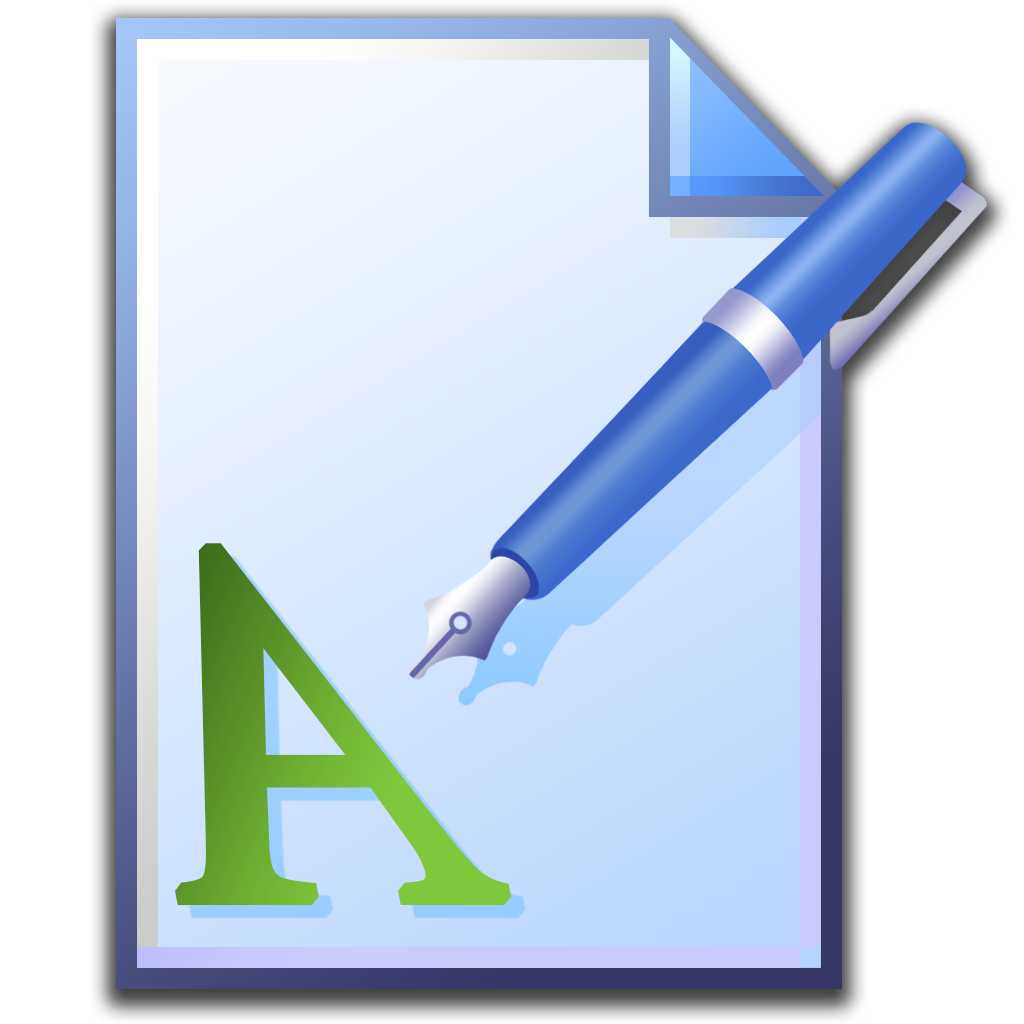
<style>
.page{position:relative;width:1024px;height:1024px;background:#ffffff}
.page>*{position:absolute;margin:0}
.t1{font:520.9px "Times-Italic";letter-spacing:0.175em;font-weight:bold;font-style:italic}
</style>
<div class="page">
<p class="t1" style="left:175px;top:543px;width:337px;height:363px;rotate:180deg">A</p>
</div>
